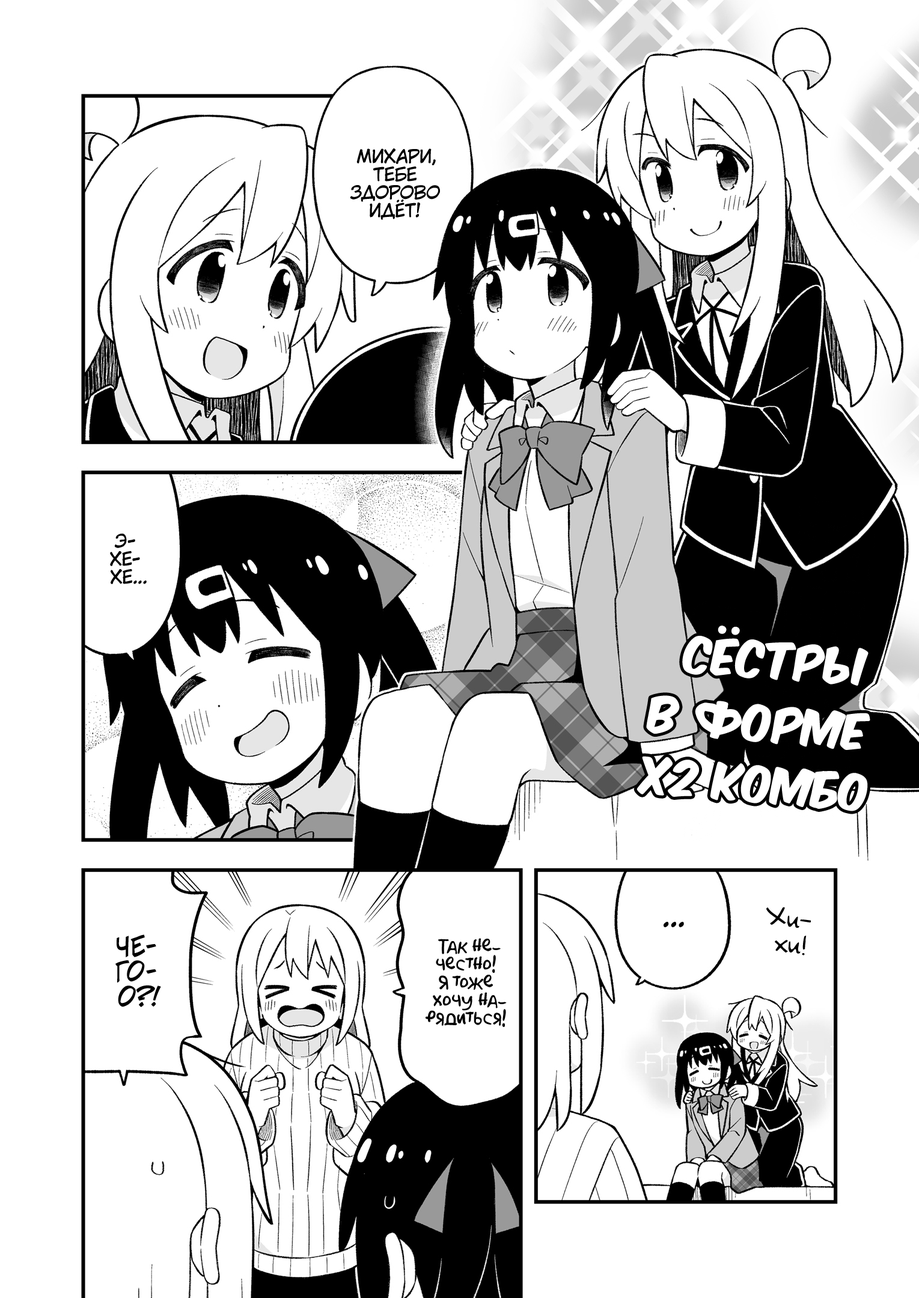
<style>
.page{position:relative;width:919px;height:1298px;background:#ffffff}
.page>*{position:absolute;margin:0}
.t1{font:18px "KuraiVoice2";color:#000000;text-transform:uppercase}
.t2{font:43.3px "KomikaTitle-AxisRUS-LAT";color:#ffffff;text-transform:uppercase}
.t3{font:25.2px "v_Augie";color:#000000}
.t4{font:28.8px "KuraiVoice2";color:#000000;text-transform:uppercase}
.t5{font:25.2px "v_CCJeffCampbell";color:#000000;text-transform:uppercase}
.t6{font:18px "AkbarPlain";color:#000000}
</style>
<div class="page">
<p class="t1" style="left:350px;top:148px;width:90px;height:72px;text-align:center">Михари,<br>тебе<br>здорово<br>идёт!</p>
<p class="t1" style="left:110px;top:534px;width:37px;height:50px;text-align:center">Э-<br>хе-<br>хе...</p>
<p class="t2" style="left:682px;top:626px;width:186px;height:60px;rotate:4deg">сёстры</p>
<p class="t2" style="left:646px;top:695px;width:224px;height:55px;rotate:5deg">в форме</p>
<p class="t2" style="left:636px;top:756px;width:232px;height:55px;rotate:5deg">x2 комбо</p>
<p class="t3" style="left:766px;top:907px;width:45px;height:48px;text-align:center;rotate:7deg">Хи-<br>хи!</p>
<p class="t4" style="left:663px;top:922px;width:21px;height:5px">...</p>
<p class="t5" style="left:115px;top:934px;width:46px;height:73px;text-align:center">Че-<br>го-<br>о?!</p>
<p class="t6" style="left:425px;top:938px;width:82px;height:89px;text-align:center">Так не-<br>честно!<br>Я тоже<br>хочу на-<br>рядиться!</p>
</div>
